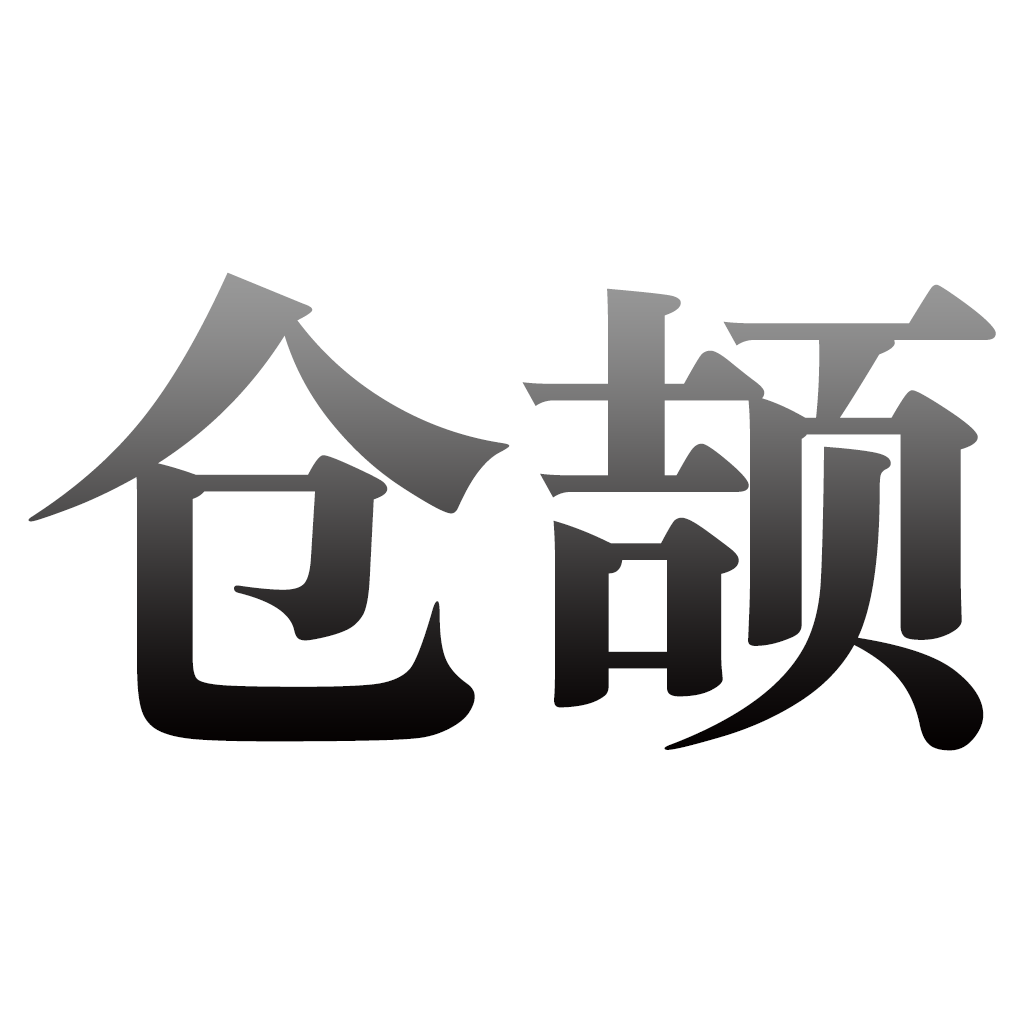
<style>
.page{position:relative;width:1024px;height:1024px;background:#ffffff}
.page>*{position:absolute;margin:0}
.t1{font:500px "STSongti-SC-Black"}
</style>
<div class="page">
<p class="t1" style="left:28px;top:272px;width:968px;height:479px">仓颉</p>
</div>
